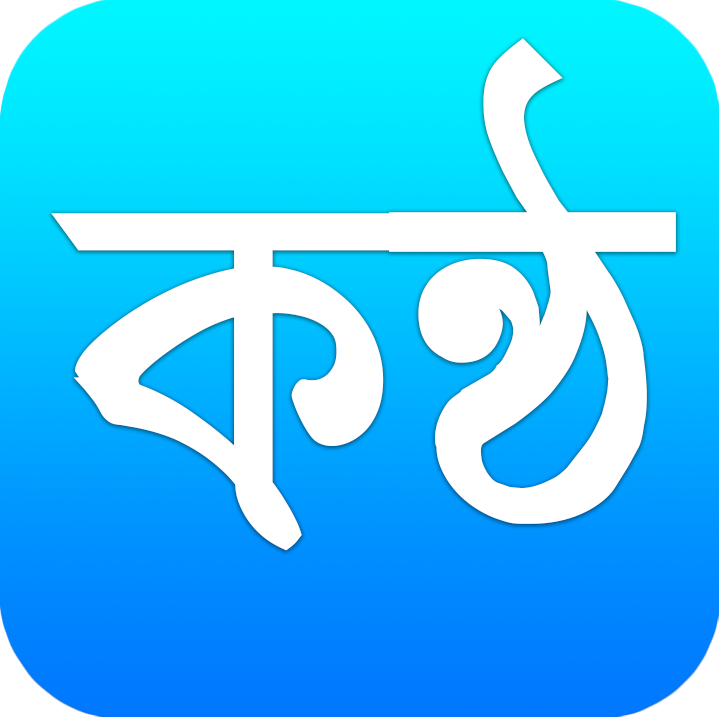
<style>
.page{position:relative;width:719px;height:717px;background:#ffffff}
.page>*{position:absolute;margin:0}
.t1{font:522px "Qayyum-Book";color:#ffffff}
</style>
<div class="page">
<p class="t1" style="left:51px;top:38px;width:625px;height:513px">কন্ঠ</p>
</div>
